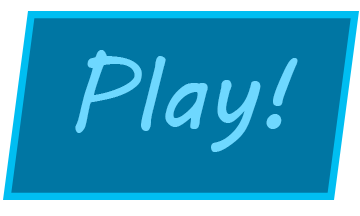
<style>
.page{position:relative;width:360px;height:216px;background:#0076a3}
.page>*{position:absolute;margin:0}
.t1{font:100px "MVBoli";color:#6ed9ff}
</style>
<div class="page">
<p class="t1" style="left:75px;top:50px;width:223px;height:102px">Play!</p>
</div>
